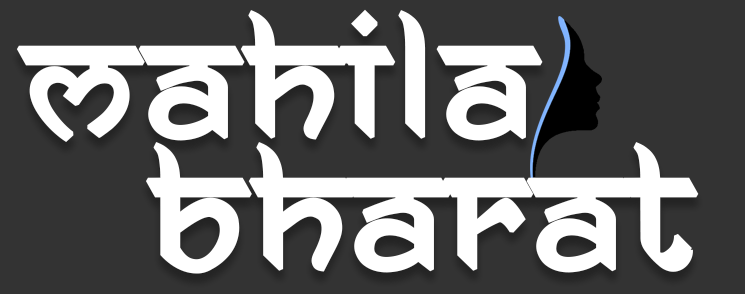
<style>
.page{position:relative;width:745px;height:294px;background:#333333}
.page>*{position:absolute;margin:0}
.t1{font:169px "AnandaNamaste";letter-spacing:0.035em;color:#ffffff;font-weight:bold}
</style>
<div class="page">
<p class="t1" style="left:16px;top:9px;width:527px;height:133px">MAHILA</p>
<p class="t1" style="left:146px;top:142px;width:553px;height:132px">BHARAT</p>
</div>
